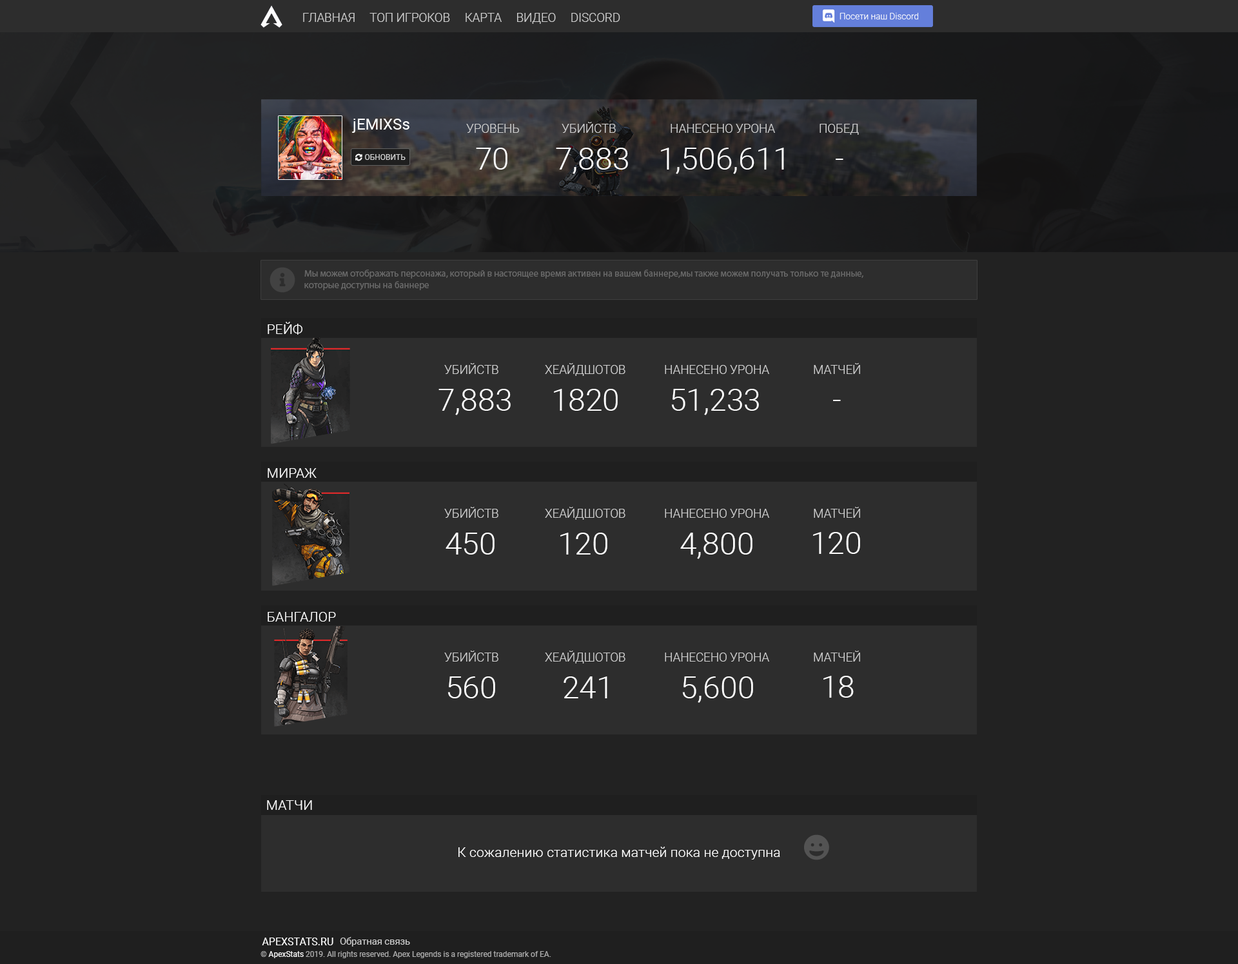
<style>
.page{position:relative;width:1238px;height:964px;background:#222222}
.page>*{position:absolute;margin:0}
.t1{font:12px "Roboto-Light";color:#cecece}
.t2{font:15.5px "Roboto-Regular";color:#ffffff}
.t3{font:30.9px "Roboto-Light";color:#ffffff}
.t4{font:9.5px "MyriadPro-Regular";color:#6b6b6b}
.t5{font:13.8px "Roboto-Light";color:#ffffff}
</style>
<div class="page">
<p class="t1" style="left:303px;top:13px;width:317px;height:11px">ГЛАВНАЯ     ТОП ИГРОКОВ     КАРТА     ВИДЕО     DISCORD</p>
<p class="t2" style="left:352px;top:119px;width:57px;height:14px">jEMIXSs</p>
<p class="t1" style="left:466px;top:124px;width:53px;height:9px">УРОВЕНЬ</p>
<p class="t1" style="left:561px;top:122px;width:55px;height:11px">УБИЙСТВ</p>
<p class="t1" style="left:670px;top:124px;width:105px;height:9px">НАНЕСЕНО УРОНА</p>
<p class="t1" style="left:819px;top:124px;width:40px;height:11px">ПОБЕД</p>
<p class="t3" style="left:476px;top:148px;width:31px;height:22px">70</p>
<p class="t3" style="left:556px;top:148px;width:72px;height:26px">7,883</p>
<p class="t3" style="left:661px;top:148px;width:123px;height:26px">1,506,611</p>
<p class="t3" style="left:835px;top:159px;width:8px;height:1px">-</p>
<p class="t4" style="left:304px;top:269px;width:559px;height:21px">Мы можем отображать персонажа, который в настоящее время активен на вашем баннере,мы также можем получать только те данные,<br>которые доступны на баннере</p>
<p class="t5" style="left:267px;top:322px;width:35px;height:13px">РЕЙФ</p>
<p class="t5" style="left:267px;top:322px;width:35px;height:13px">РЕЙФ</p>
<p class="t1" style="left:444px;top:363px;width:54px;height:11px">УБИЙСТВ</p>
<p class="t1" style="left:545px;top:363px;width:80px;height:13px">ХЕАЙДШОТОВ</p>
<p class="t1" style="left:665px;top:365px;width:104px;height:9px">НАНЕСЕНО УРОНА</p>
<p class="t1" style="left:813px;top:363px;width:47px;height:11px">МАТЧЕЙ</p>
<p class="t3" style="left:438px;top:389px;width:72px;height:26px">7,883</p>
<p class="t3" style="left:554px;top:389px;width:63px;height:22px">1820</p>
<p class="t3" style="left:671px;top:389px;width:88px;height:26px">51,233</p>
<p class="t3" style="left:833px;top:400px;width:7px;height:1px">-</p>
<p class="t5" style="left:267px;top:468px;width:49px;height:10px">МИРАЖ</p>
<p class="t1" style="left:444px;top:507px;width:54px;height:11px">УБИЙСТВ</p>
<p class="t1" style="left:545px;top:507px;width:80px;height:12px">ХЕАЙДШОТОВ</p>
<p class="t1" style="left:665px;top:509px;width:104px;height:9px">НАНЕСЕНО УРОНА</p>
<p class="t1" style="left:813px;top:507px;width:47px;height:11px">МАТЧЕЙ</p>
<p class="t3" style="left:445px;top:532px;width:49px;height:22px">450</p>
<p class="t3" style="left:560px;top:532px;width:47px;height:22px">120</p>
<p class="t3" style="left:680px;top:532px;width:72px;height:27px">4,800</p>
<p class="t3" style="left:813px;top:532px;width:47px;height:22px">120</p>
<p class="t5" style="left:267px;top:612px;width:69px;height:9px">БАНГАЛОР</p>
<p class="t1" style="left:444px;top:650px;width:54px;height:11px">УБИЙСТВ</p>
<p class="t1" style="left:545px;top:650px;width:80px;height:13px">ХЕАЙДШОТОВ</p>
<p class="t1" style="left:665px;top:652px;width:104px;height:9px">НАНЕСЕНО УРОНА</p>
<p class="t1" style="left:813px;top:650px;width:47px;height:11px">МАТЧЕЙ</p>
<p class="t3" style="left:447px;top:676px;width:48px;height:22px">560</p>
<p class="t3" style="left:563px;top:676px;width:44px;height:22px">241</p>
<p class="t3" style="left:682px;top:676px;width:71px;height:27px">5,600</p>
<p class="t3" style="left:823px;top:675px;width:30px;height:22px">18</p>
<p class="t5" style="left:267px;top:800px;width:45px;height:10px">МАТЧИ</p>
</div>
